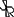
<style>
.page{position:relative;width:14px;height:17px;background:#ffffff}
.page>*{position:absolute;margin:0}
.t1{font:12.4px "EdgeCaps-Regular";letter-spacing:0.1em;color:#010101;font-weight:bold;scale:1.12 1}
</style>
<div class="page">
<p class="t1" style="left:0px;top:0px;width:7px;height:11px">J</p>
<p class="t1" style="left:5px;top:6px;width:9px;height:11px">RR</p>
</div>
